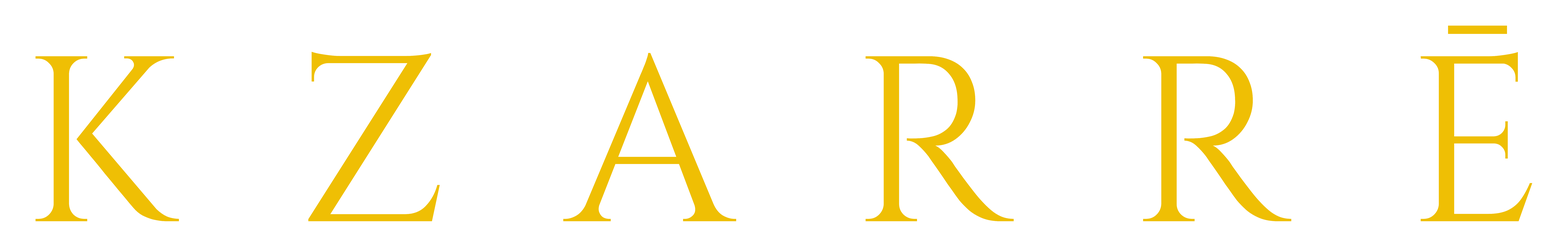
<style>
.page{position:relative;width:1568px;height:247px;background:#ffffff}
.page>*{position:absolute;margin:0}
.t1{font:235.8px "CinzelRoman-Regular";color:#efbf04}
</style>
<div class="page">
<p class="t1" style="left:36px;top:26px;width:1496px;height:195px">K  Z  A  R  R  Ē</p>
</div>
